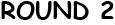
<style>
.page{position:relative;width:115px;height:25px;background:#ffffff}
.page>*{position:absolute;margin:0}
.t1{font:24px "ComicSansMS-Bold";color:#000000}
</style>
<div class="page">
<p class="t1" style="left:1px;top:1px;width:113px;height:19px">ROUND 2</p>
</div>
